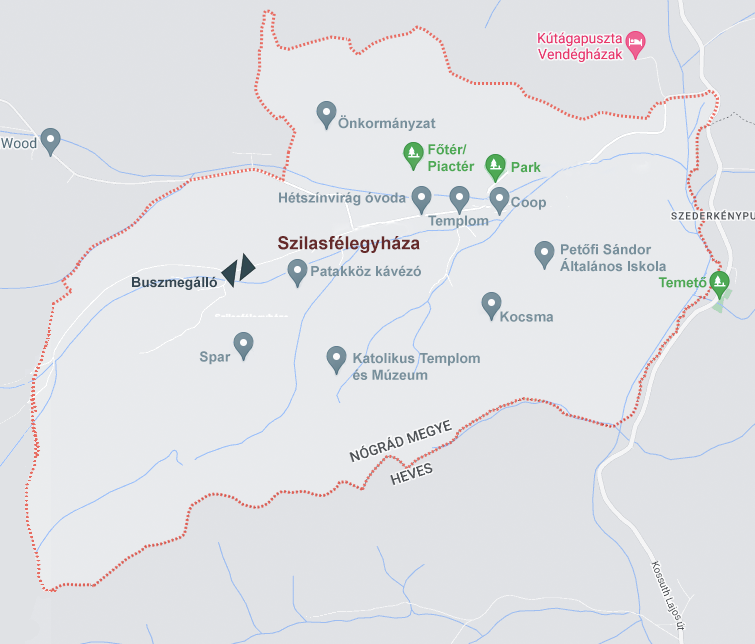
<style>
.page{position:relative;width:755px;height:644px;background:#e0e2e5}
.page>*{position:absolute;margin:0}
.t1{font:14px "Arial-BoldMT";color:#78909c}
.t2{font:14px "Arial-BoldMT";color:#4da954}
.t3{font:14px "Arial-BoldMT";color:#788f9c}
.t4{font:18px "Arial-BoldMT";color:#662a2a}
.t5{font:14px "Arial-BoldMT";color:#344651}
</style>
<div class="page">
<p class="t1" style="left:338px;top:115px;width:98px;height:16px">Önkormányzat</p>
<p class="t2" style="left:428px;top:144px;width:47px;height:28px">Főtér/<br>Piactér</p>
<p class="t2" style="left:511px;top:162px;width:30px;height:11px">Park</p>
<p class="t3" style="left:279px;top:192px;width:127px;height:14px">Hétszínvirág óvoda</p>
<p class="t1" style="left:511px;top:196px;width:35px;height:14px">Coop</p>
<p class="t1" style="left:428px;top:215px;width:61px;height:14px">Templom</p>
<p class="t4" style="left:278px;top:236px;width:142px;height:17px">Szilasfélegyháza</p>
<p class="t1" style="left:560px;top:244px;width:106px;height:28px">Petőfi Sándor<br>Általános Iskola</p>
<p class="t1" style="left:311px;top:265px;width:110px;height:12px">Patakköz kávézó</p>
<p class="t5" style="left:132px;top:276px;width:85px;height:14px">Buszmegálló</p>
<p class="t2" style="left:658px;top:277px;width:49px;height:11px">Temető</p>
<p class="t1" style="left:500px;top:311px;width:54px;height:11px">Kocsma</p>
<p class="t1" style="left:199px;top:351px;width:32px;height:14px">Spar</p>
<p class="t1" style="left:353px;top:353px;width:127px;height:27px">Katolikus Templom<br>és Múzeum</p>
</div>
